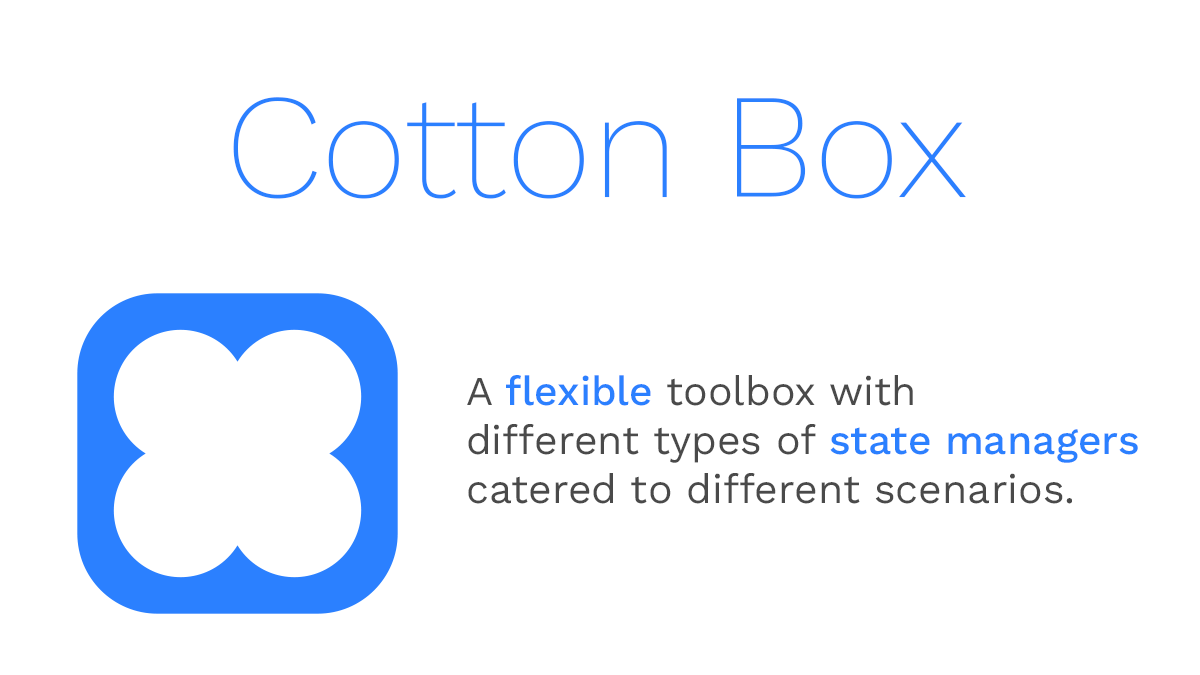
<style>
.page{position:relative;width:1200px;height:675px;background:#ffffff}
.page>*{position:absolute;margin:0}
.t1{font:148.9px "WorkSansRoman-ExtraLight";color:#2b80ff}
.t2{font:41px "WorkSans-Regular";color:#4a4a4a}
.t3{font:41px "WorkSansRoman-Medium";color:#2b80ff}
</style>
<div class="page">
<p class="t1" style="left:233px;top:97px;width:733px;height:102px">Cotton Box</p>
<p class="t2" style="left:467px;top:375px;width:671px;height:129px">A <span class="t3">flexible</span> toolbox with<br>different types of <span class="t3">state managers<br></span>catered to different scenarios.</p>
</div>
